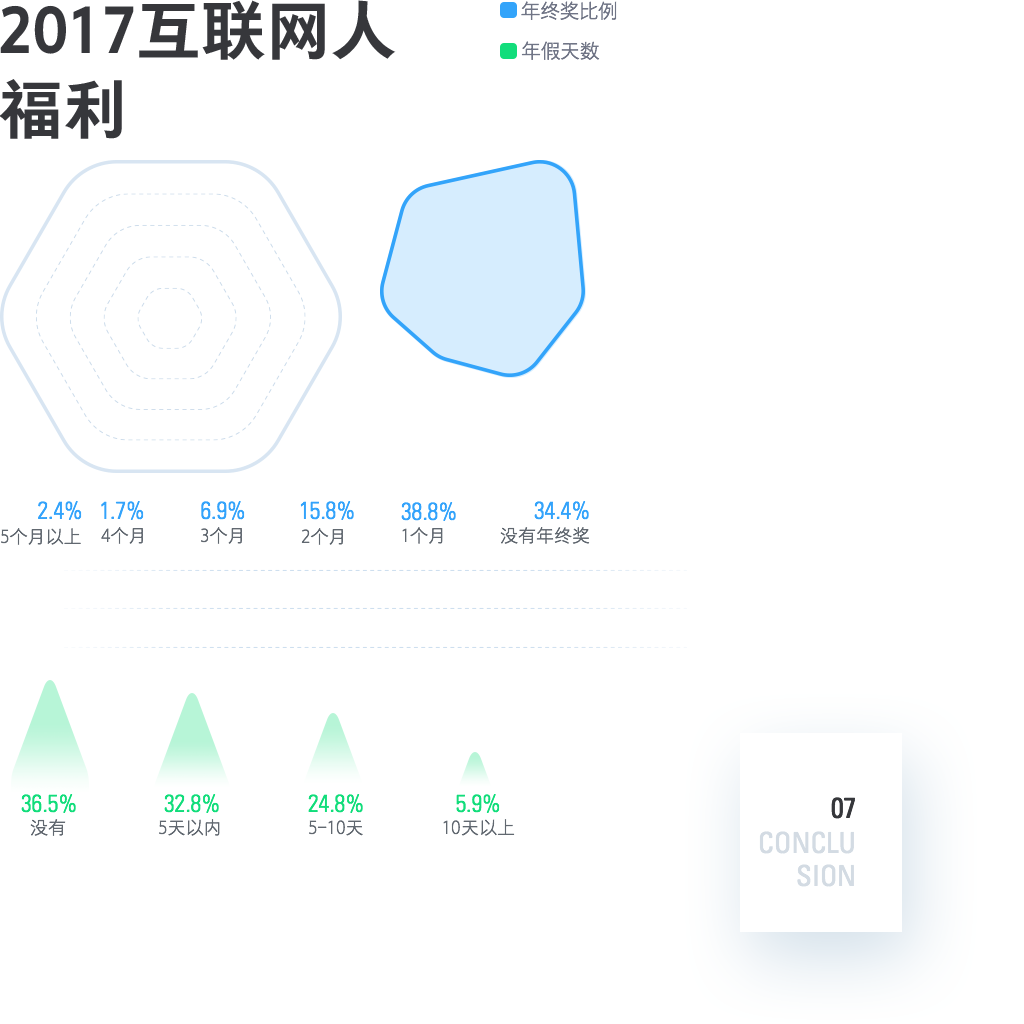
<style>
.page{position:relative;width:1024px;height:1024px;background:#ffffff}
.page>*{position:absolute;margin:0}
.t1{font:64.9px/78.9px "FZYOUH_512B--GB1-4";color:#36373b}
.t2{font:20px "FZYOUH_503L--GB1-4";letter-spacing:-0.03em;color:#707586}
.t3{font:24px "UniversLTStd-LightCn";color:#33a3fb}
.t4{font:18px "FZYOUH_503L--GB1-4";color:#616870}
.t5{font:24px "UniversLTStd-LightCn";color:#12dd7b}
.t6{font:28.4px "UniversLTStd-Cn";color:#36373b;text-transform:uppercase}
.t7{font:28.4px/33.6px "UniversLTStd-Cn";color:#d3dbe3;text-transform:uppercase}
</style>
<div class="page">
<p class="t1" style="left:0px;top:0px;width:396px;height:139px">2017互联网人<br>福利</p>
<p class="t2" style="left:521px;top:1px;width:96px;height:19px">年终奖比例</p>
<p class="t2" style="left:521px;top:41px;width:79px;height:19px">年假天数</p>
<p class="t3" style="left:38px;top:501px;width:44px;height:19px">2.4%</p>
<p class="t3" style="left:101px;top:501px;width:43px;height:19px">1.7%</p>
<p class="t3" style="left:201px;top:501px;width:44px;height:19px">6.9%</p>
<p class="t3" style="left:300px;top:501px;width:54px;height:19px">15.8%</p>
<p class="t3" style="left:401px;top:502px;width:55px;height:19px">38.8%</p>
<p class="t3" style="left:534px;top:501px;width:55px;height:19px">34.4%</p>
<p class="t4" style="left:1px;top:528px;width:80px;height:17px">5个月以上</p>
<p class="t4" style="left:101px;top:527px;width:42px;height:17px">4个月</p>
<p class="t4" style="left:201px;top:527px;width:41px;height:17px">3个月</p>
<p class="t4" style="left:301px;top:528px;width:42px;height:17px">2个月</p>
<p class="t4" style="left:402px;top:527px;width:41px;height:17px">1个月</p>
<p class="t4" style="left:500px;top:527px;width:90px;height:17px">没有年终奖</p>
<p class="t5" style="left:21px;top:794px;width:55px;height:19px">36.5%</p>
<p class="t5" style="left:164px;top:794px;width:55px;height:19px">32.8%</p>
<p class="t5" style="left:308px;top:794px;width:55px;height:19px">24.8%</p>
<p class="t5" style="left:456px;top:794px;width:44px;height:19px">5.9%</p>
<p class="t6" style="left:831px;top:797px;width:24px;height:22px">07</p>
<p class="t4" style="left:30px;top:819px;width:36px;height:17px">没有</p>
<p class="t4" style="left:159px;top:819px;width:61px;height:17px">5天以内</p>
<p class="t4" style="left:309px;top:820px;width:54px;height:16px">5-10天</p>
<p class="t4" style="left:443px;top:819px;width:72px;height:17px">10天以上</p>
<p class="t7" style="left:759px;top:831px;width:95px;height:56px;text-align:right">conclu<br>sion</p>
</div>
